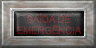
<style>
.page{position:relative;width:96px;height:48px}
.page>*{position:absolute;margin:0}
.t1{font:10px/11px "ArialMT";color:#6d3939;scale:0.96 1}
</style>
<div class="page">
<p class="t1" style="left:17px;top:13px;width:65px;height:21px;text-align:center">SAÍDA DE<br>EMERGÊNCIA</p>
</div>
